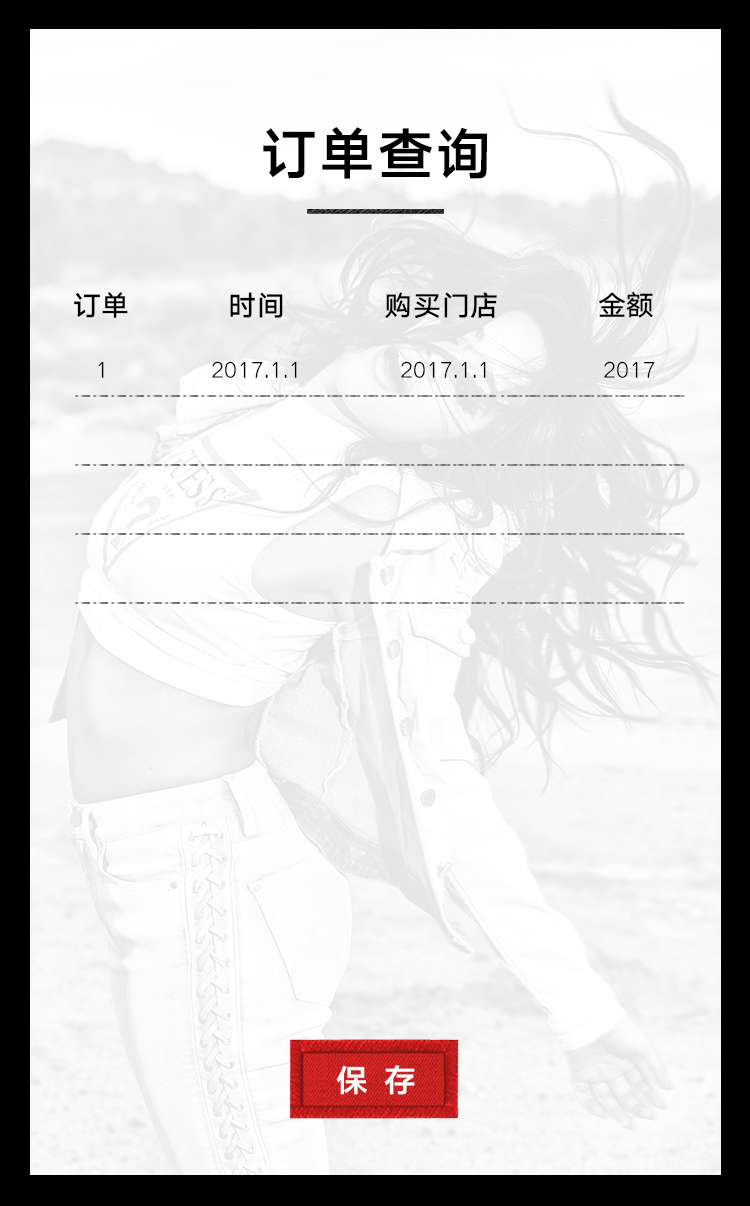
<style>
.page{position:relative;width:750px;height:1206px}
.page>*{position:absolute;margin:0}
.t1{font:56px "HYQiHei-GZS";letter-spacing:0.04em;color:#000000}
.t2{font:28px "HYQiHei-FZS";letter-spacing:0.02em;color:#000000}
.t3{font:22px "HYQiHei-DZS";letter-spacing:0.02em;color:#000000}
</style>
<div class="page">
<p class="t1" style="left:263px;top:126px;width:225px;height:53px">订单查询</p>
<p class="t2" style="left:74px;top:291px;width:579px;height:28px">订单          时间          购买门店          金额</p>
<p class="t3" style="left:98px;top:361px;width:6px;height:17px">1</p>
<p class="t3" style="left:212px;top:361px;width:85px;height:17px">2017.1.1</p>
<p class="t3" style="left:401px;top:361px;width:85px;height:17px">2017.1.1</p>
<p class="t3" style="left:604px;top:361px;width:51px;height:17px">2017</p>
</div>
